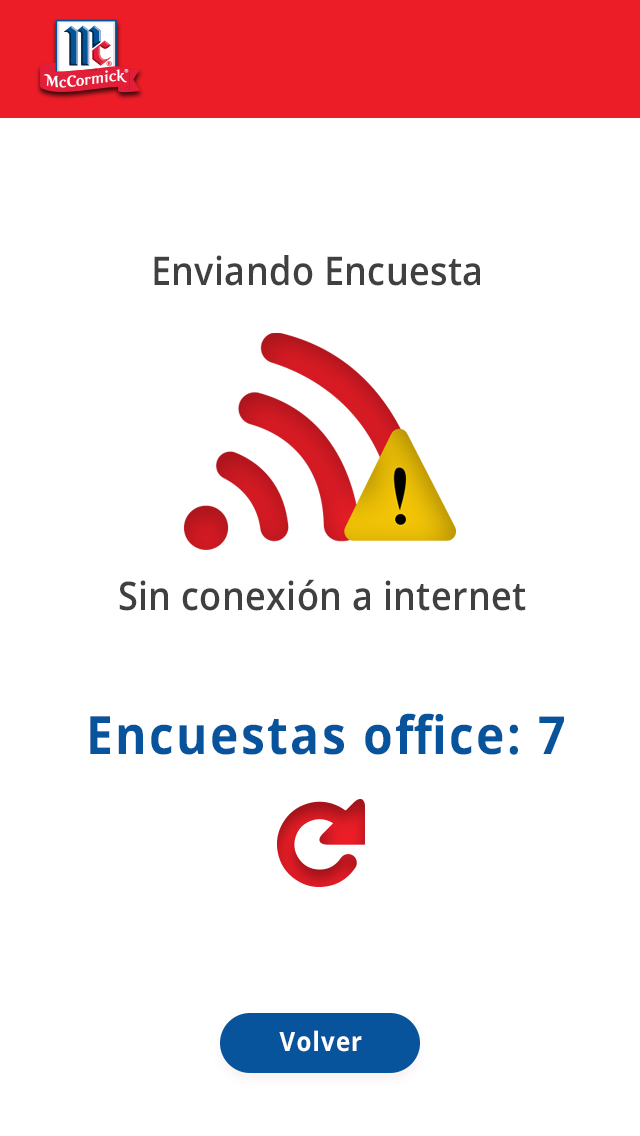
<style>
.page{position:relative;width:640px;height:1136px;background:#ffffff}
.page>*{position:absolute;margin:0}
.t1{font:39.6px "OpenSans-SemiBold";letter-spacing:0.01em;color:#404040;scale:0.91 1}
.t2{font:52.8px "OpenSans-Bold";letter-spacing:0.05em;color:#07549c;scale:0.91 1}
.t3{font:26.4px "OpenSans-Bold";letter-spacing:0.05em;color:#ffffff;scale:0.91 1}
</style>
<div class="page">
<p class="t1" style="left:154px;top:255px;width:326px;height:31px">Enviando Encuesta</p>
<p class="t1" style="left:119px;top:579px;width:407px;height:32px">Sin conexión a internet</p>
<p class="t2" style="left:90px;top:713px;width:474px;height:42px">Encuestas office: 7</p>
<p class="t3" style="left:279px;top:1030px;width:83px;height:22px">Volver</p>
</div>
